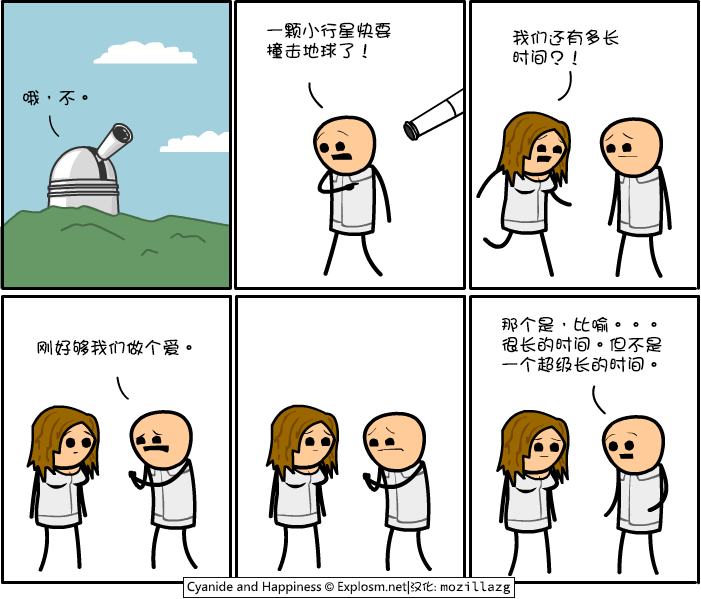
<style>
.page{position:relative;width:701px;height:599px;background:#ffffff}
.page>*{position:absolute;margin:0}
.t1{font:18px/20px "DFGirl";color:#000000}
.t2{font:18px "DFGirl";color:#000000}
</style>
<div class="page">
<p class="t1" style="left:266px;top:22px;width:125px;height:37px">一颗小行星快要<br>撞击地球了！</p>
<p class="t1" style="left:512px;top:29px;width:107px;height:37px">我们还有多长<br>时间？！</p>
<p class="t2" style="left:23px;top:90px;width:65px;height:16px">哦，不。</p>
<p class="t1" style="left:502px;top:316px;width:160px;height:57px">那个是，比喻。。。<br>很长的时间。但不是<br>一个超级长的时间。</p>
<p class="t2" style="left:37px;top:339px;width:155px;height:17px">刚好够我们做个爱。</p>
</div>
